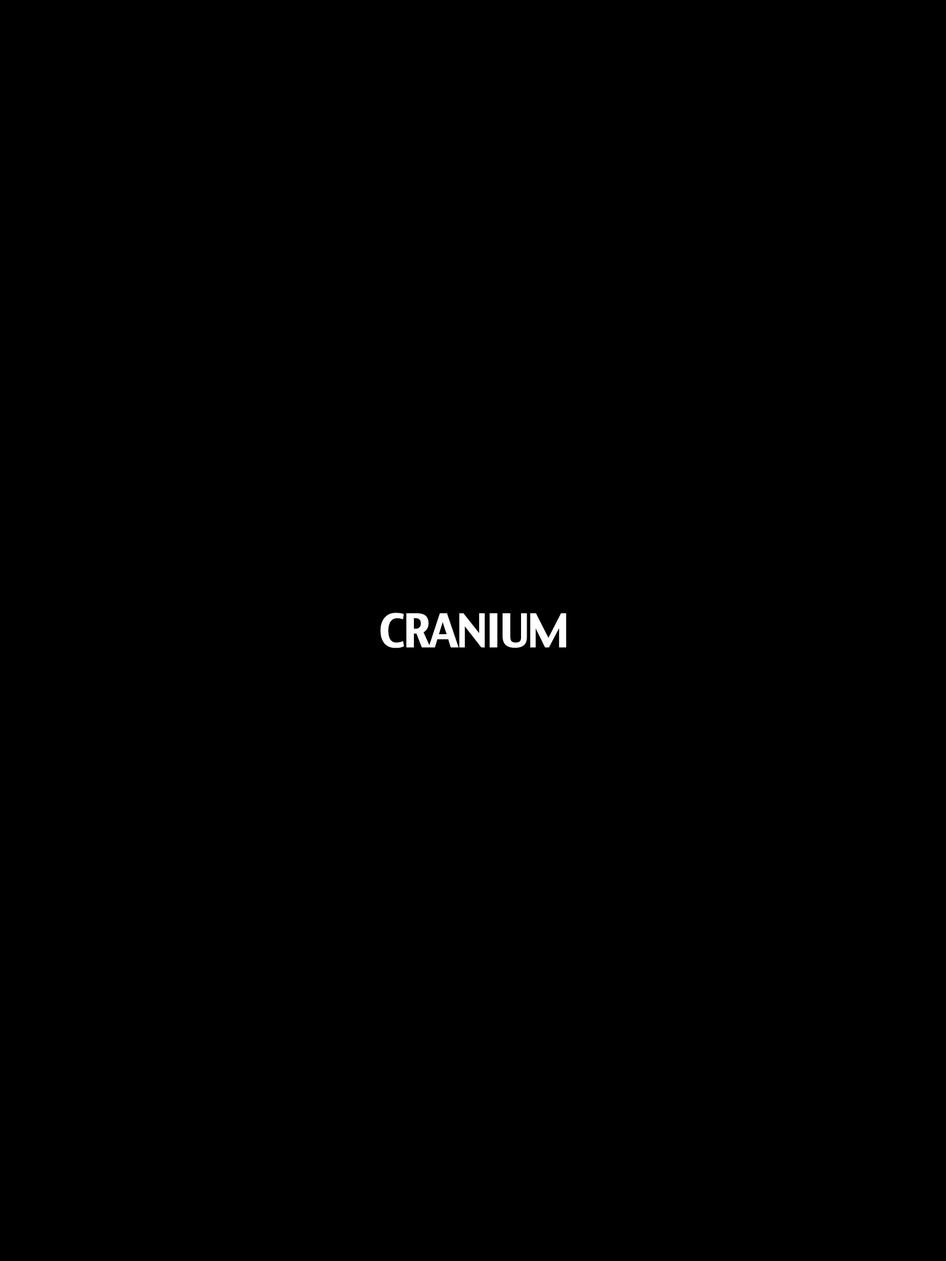
<style>
.page{position:relative;width:946px;height:1261px;background:#000000}
.page>*{position:absolute;margin:0}
.t1{font:45.2px "CharcoalCY";letter-spacing:-0.05em;color:#ffffff}
</style>
<div class="page">
<p class="t1" style="left:380px;top:613px;width:186px;height:35px">CRANIUM</p>
</div>
